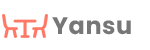
<style>
.page{position:relative;width:150px;height:50px;background:#ffffff}
.page>*{position:absolute;margin:0}
.t1{font:24px "Poppins-Bold";letter-spacing:0.025em;color:#777777}
</style>
<div class="page">
<p class="t1" style="left:52px;top:17px;width:79px;height:18px">Yansu</p>
</div>
